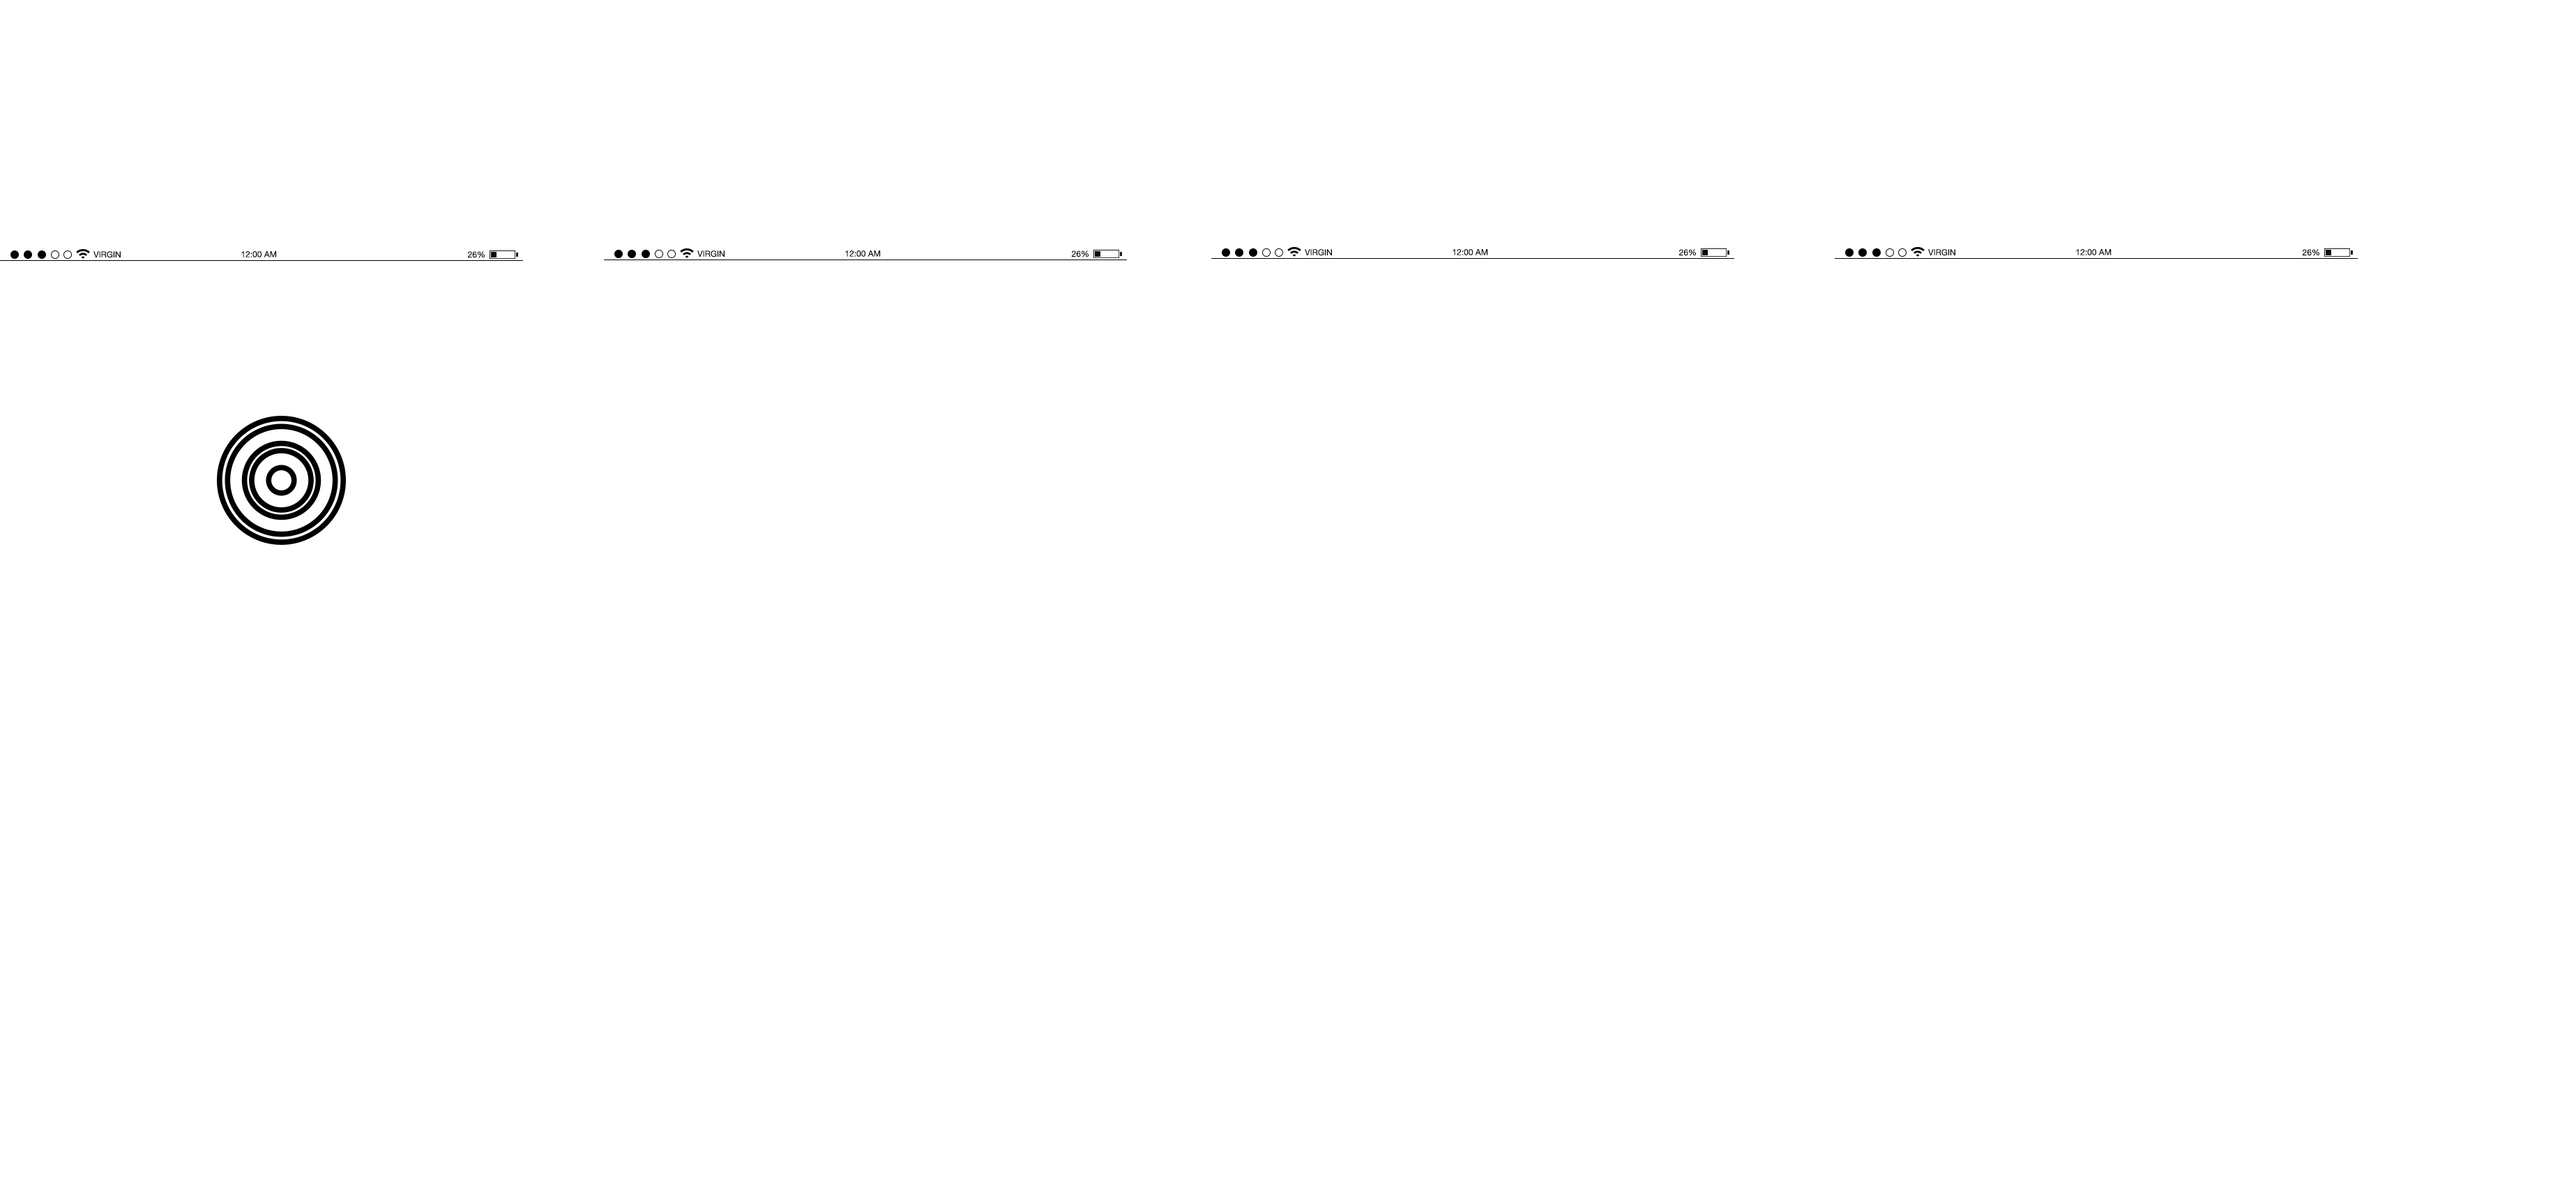
<style>
.page{position:relative;width:2576px;height:1179px;background:#ffffff}
.page>*{position:absolute;margin:0}
.t1{font:8.4px "HelveticaNeue";color:#0b0b0b}
</style>
<div class="page">
<p class="t1" style="left:93px;top:251px;width:28px;height:7px">VIRGIN</p>
<p class="t1" style="left:241px;top:251px;width:36px;height:6px">12:00 AM</p>
<p class="t1" style="left:467px;top:251px;width:18px;height:7px">26%</p>
<p class="t1" style="left:697px;top:250px;width:28px;height:7px">VIRGIN</p>
<p class="t1" style="left:845px;top:250px;width:36px;height:7px">12:00 AM</p>
<p class="t1" style="left:1071px;top:250px;width:18px;height:7px">26%</p>
<p class="t1" style="left:1305px;top:249px;width:27px;height:7px">VIRGIN</p>
<p class="t1" style="left:1453px;top:249px;width:35px;height:6px">12:00 AM</p>
<p class="t1" style="left:1679px;top:249px;width:17px;height:7px">26%</p>
<p class="t1" style="left:1928px;top:249px;width:27px;height:7px">VIRGIN</p>
<p class="t1" style="left:2076px;top:249px;width:36px;height:6px">12:00 AM</p>
<p class="t1" style="left:2302px;top:249px;width:17px;height:7px">26%</p>
</div>
